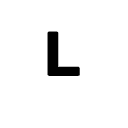
<style>
.page{position:relative;width:128px;height:128px;background:#ffffff}
.page>*{position:absolute;margin:0}
.t1{font:60px "Arial-BoldMT";letter-spacing:0.02em;color:#000000}
</style>
<div class="page">
<p class="t1" style="left:48px;top:32px;width:31px;height:43px">L</p>
</div>
